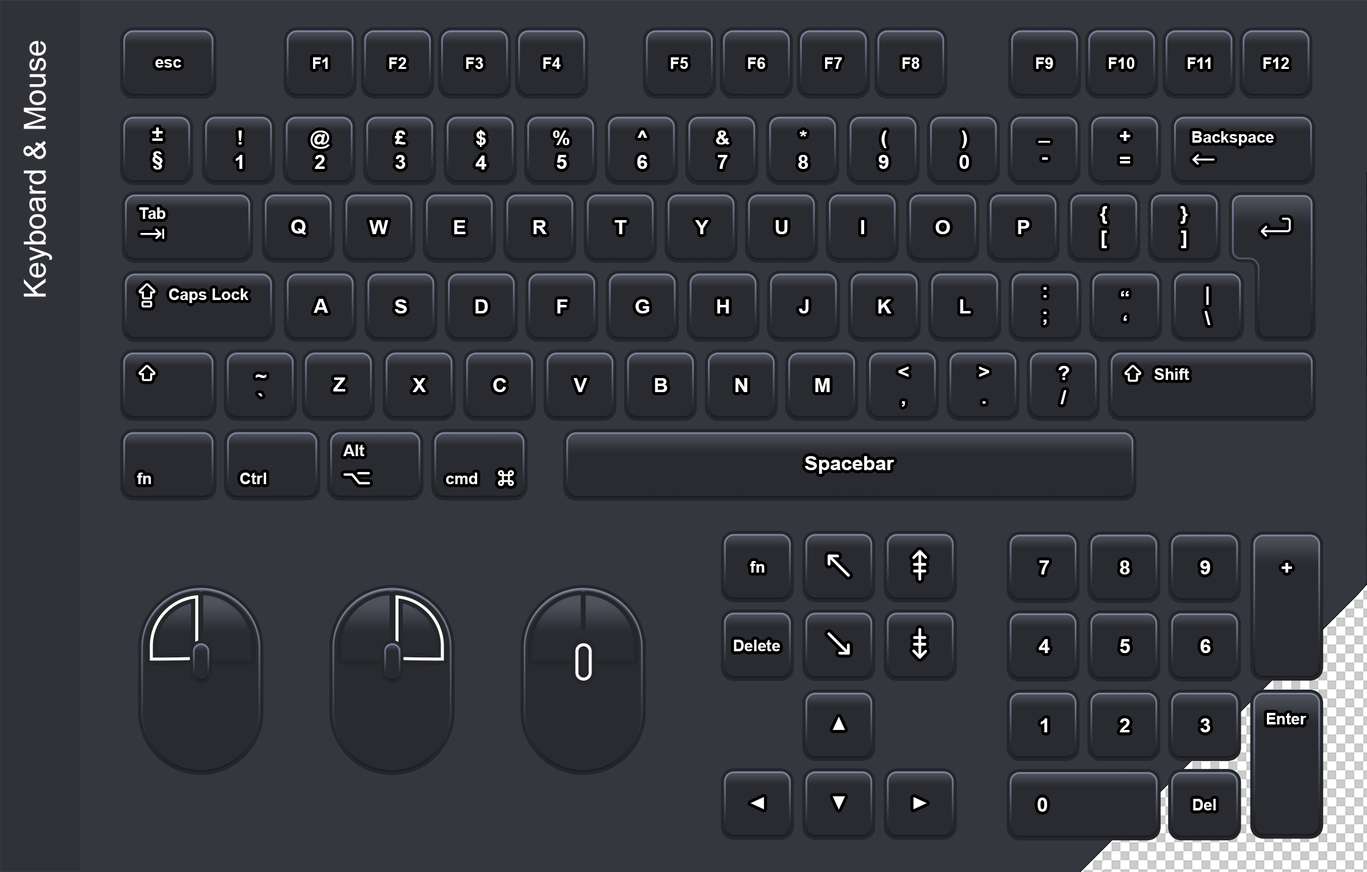
<style>
.page{position:relative;width:1367px;height:872px;background:#35373e}
.page>*{position:absolute;margin:0}
.t1{font:30.5px "ArialMT";color:#ffffff}
.t2{font:15.8px "Arial-BoldMT";color:#ffffff}
.t3{font:19.8px/24.4px "Arial-BoldMT";color:#ffffff}
.t4{font:19.8px "Arial-BoldMT";color:#ffffff}
</style>
<div class="page">
<p class="t1" style="left:23px;top:41px;width:29px;height:256px;rotate:-90deg">Keyboard &amp; Mouse</p>
<p class="t2" style="left:155px;top:59px;width:26px;height:9px">esc</p>
<p class="t2" style="left:313px;top:57px;width:15px;height:12px">F1</p>
<p class="t2" style="left:389px;top:57px;width:17px;height:12px">F2</p>
<p class="t2" style="left:466px;top:57px;width:17px;height:12px">F3</p>
<p class="t2" style="left:543px;top:57px;width:18px;height:12px">F4</p>
<p class="t2" style="left:671px;top:57px;width:17px;height:12px">F5</p>
<p class="t2" style="left:748px;top:57px;width:17px;height:12px">F6</p>
<p class="t2" style="left:825px;top:57px;width:17px;height:12px">F7</p>
<p class="t2" style="left:902px;top:57px;width:17px;height:12px">F8</p>
<p class="t2" style="left:1036px;top:57px;width:17px;height:12px">F9</p>
<p class="t2" style="left:1109px;top:57px;width:25px;height:12px">F10</p>
<p class="t2" style="left:1187px;top:57px;width:24px;height:12px">F11</p>
<p class="t2" style="left:1263px;top:57px;width:26px;height:12px">F12</p>
<p class="t3" style="left:152px;top:128px;width:11px;height:42px;text-align:center">±<br>§</p>
<p class="t3" style="left:236px;top:131px;width:6px;height:38px;text-align:center">!<br>1</p>
<p class="t3" style="left:310px;top:131px;width:20px;height:38px;text-align:center">@<br>2</p>
<p class="t3" style="left:395px;top:131px;width:11px;height:38px;text-align:center">£<br>3</p>
<p class="t3" style="left:475px;top:130px;width:11px;height:40px;text-align:center">$<br>4</p>
<p class="t3" style="left:553px;top:131px;width:16px;height:38px;text-align:center">%<br>5</p>
<p class="t3" style="left:637px;top:131px;width:10px;height:38px;text-align:center">^<br>6</p>
<p class="t3" style="left:716px;top:131px;width:14px;height:38px;text-align:center">&amp;<br>7</p>
<p class="t3" style="left:798px;top:131px;width:10px;height:38px;text-align:center">*<br>8</p>
<p class="t3" style="left:879px;top:131px;width:9px;height:38px;text-align:center">(<br>9</p>
<p class="t3" style="left:959px;top:131px;width:10px;height:38px;text-align:center">)<br>0</p>
<p class="t3" style="left:1120px;top:131px;width:10px;height:33px;text-align:center">+<br>=</p>
<p class="t2" style="left:1192px;top:131px;width:81px;height:15px">Backspace</p>
<p class="t3" style="left:1038px;top:141px;width:12px;height:19px;text-align:center">_<br>-</p>
<p class="t2" style="left:139px;top:207px;width:26px;height:12px">Tab</p>
<p class="t3" style="left:1099px;top:206px;width:8px;height:42px;text-align:center">{<br>[</p>
<p class="t3" style="left:1180px;top:206px;width:7px;height:42px;text-align:center">}<br>]</p>
<p class="t4" style="left:291px;top:220px;width:15px;height:15px">Q</p>
<p class="t4" style="left:369px;top:220px;width:19px;height:14px">W</p>
<p class="t4" style="left:454px;top:220px;width:12px;height:14px">E</p>
<p class="t4" style="left:533px;top:220px;width:14px;height:14px">R</p>
<p class="t4" style="left:614px;top:220px;width:13px;height:14px">T</p>
<p class="t4" style="left:695px;top:220px;width:13px;height:14px">Y</p>
<p class="t4" style="left:775px;top:220px;width:13px;height:14px">U</p>
<p class="t4" style="left:861px;top:220px;width:3px;height:14px">I</p>
<p class="t4" style="left:935px;top:220px;width:15px;height:14px">O</p>
<p class="t4" style="left:1018px;top:220px;width:11px;height:14px">P</p>
<p class="t2" style="left:169px;top:289px;width:79px;height:14px">Caps Lock</p>
<p class="t3" style="left:1043px;top:287px;width:3px;height:38px;text-align:center">:<br>;</p>
<p class="t3" style="left:1121px;top:291px;width:8px;height:30px;text-align:center">“<br>‘</p>
<p class="t3" style="left:1204px;top:287px;width:7px;height:38px;text-align:center">|<br>\</p>
<p class="t4" style="left:314px;top:299px;width:14px;height:14px">A</p>
<p class="t4" style="left:395px;top:300px;width:12px;height:14px">S</p>
<p class="t4" style="left:475px;top:300px;width:13px;height:14px">D</p>
<p class="t4" style="left:557px;top:300px;width:10px;height:14px">F</p>
<p class="t4" style="left:635px;top:300px;width:14px;height:14px">G</p>
<p class="t4" style="left:717px;top:300px;width:12px;height:14px">H</p>
<p class="t4" style="left:799px;top:300px;width:9px;height:14px">J</p>
<p class="t4" style="left:878px;top:300px;width:13px;height:14px">K</p>
<p class="t4" style="left:960px;top:300px;width:11px;height:14px">L</p>
<p class="t3" style="left:256px;top:375px;width:11px;height:22px;text-align:center">~<br>`</p>
<p class="t4" style="left:333px;top:378px;width:12px;height:14px">Z</p>
<p class="t3" style="left:898px;top:367px;width:10px;height:40px;text-align:center">&lt;<br>,</p>
<p class="t3" style="left:979px;top:367px;width:10px;height:37px;text-align:center">&gt;<br>.</p>
<p class="t3" style="left:1058px;top:366px;width:11px;height:39px;text-align:center">?<br>/</p>
<p class="t2" style="left:1154px;top:369px;width:35px;height:11px">Shift</p>
<p class="t4" style="left:412px;top:378px;width:14px;height:14px">X</p>
<p class="t4" style="left:493px;top:378px;width:13px;height:14px">C</p>
<p class="t4" style="left:574px;top:378px;width:13px;height:14px">V</p>
<p class="t4" style="left:655px;top:378px;width:12px;height:14px">B</p>
<p class="t4" style="left:735px;top:378px;width:12px;height:14px">N</p>
<p class="t4" style="left:815px;top:378px;width:15px;height:14px">M</p>
<p class="t2" style="left:343px;top:445px;width:21px;height:11px">Alt</p>
<p class="t4" style="left:805px;top:456px;width:89px;height:18px">Spacebar</p>
<p class="t2" style="left:137px;top:473px;width:14px;height:11px">fn</p>
<p class="t2" style="left:240px;top:473px;width:26px;height:11px">Ctrl</p>
<p class="t2" style="left:446px;top:473px;width:31px;height:11px">cmd</p>
<p class="t2" style="left:750px;top:561px;width:14px;height:12px">fn</p>
<p class="t4" style="left:1039px;top:561px;width:10px;height:14px">7</p>
<p class="t4" style="left:1120px;top:561px;width:9px;height:14px">8</p>
<p class="t4" style="left:1200px;top:561px;width:10px;height:14px">9</p>
<p class="t4" style="left:1281px;top:563px;width:11px;height:10px">+</p>
<p class="t2" style="left:733px;top:640px;width:47px;height:12px">Delete</p>
<p class="t4" style="left:1038px;top:639px;width:11px;height:14px">4</p>
<p class="t4" style="left:1120px;top:639px;width:10px;height:14px">5</p>
<p class="t4" style="left:1200px;top:639px;width:11px;height:14px">6</p>
<p class="t2" style="left:1267px;top:713px;width:39px;height:12px">Enter</p>
<p class="t4" style="left:1040px;top:719px;width:7px;height:14px">1</p>
<p class="t4" style="left:1120px;top:719px;width:9px;height:14px">2</p>
<p class="t4" style="left:1200px;top:719px;width:10px;height:14px">3</p>
<p class="t4" style="left:1037px;top:798px;width:10px;height:14px">0</p>
<p class="t2" style="left:1193px;top:799px;width:22px;height:12px">Del</p>
</div>
